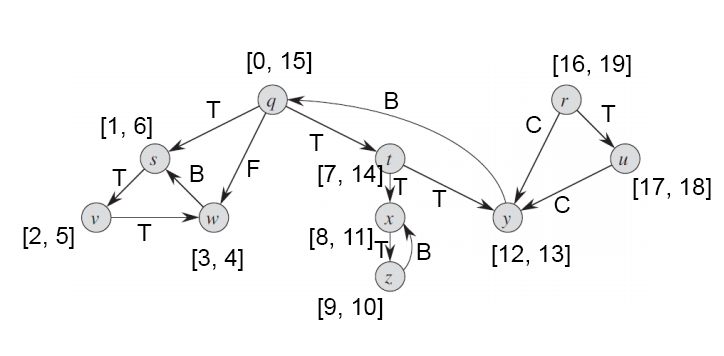
<style>
.page{position:relative;width:724px;height:356px;background:#ffffff}
.page>*{position:absolute;margin:0}
.t1{font:24px "ArialMT";color:#000000}
</style>
<div class="page">
<p class="t1" style="left:247px;top:52px;width:65px;height:22px">[0, 15]</p>
<p class="t1" style="left:553px;top:55px;width:78px;height:22px">[16, 19]</p>
<p class="t1" style="left:206px;top:101px;width:15px;height:17px">T</p>
<p class="t1" style="left:385px;top:92px;width:14px;height:17px">B</p>
<p class="t1" style="left:601px;top:105px;width:15px;height:17px">T</p>
<p class="t1" style="left:101px;top:117px;width:51px;height:22px">[1, 6]</p>
<p class="t1" style="left:526px;top:116px;width:16px;height:17px">C</p>
<p class="t1" style="left:309px;top:134px;width:15px;height:17px">T</p>
<p class="t1" style="left:248px;top:160px;width:12px;height:17px">F</p>
<p class="t1" style="left:112px;top:169px;width:15px;height:17px">T</p>
<p class="t1" style="left:190px;top:165px;width:14px;height:17px">B</p>
<p class="t1" style="left:318px;top:165px;width:65px;height:22px">[7, 14]</p>
<p class="t1" style="left:393px;top:178px;width:15px;height:17px">T</p>
<p class="t1" style="left:633px;top:178px;width:78px;height:22px">[17, 18]</p>
<p class="t1" style="left:432px;top:190px;width:15px;height:17px">T</p>
<p class="t1" style="left:554px;top:196px;width:16px;height:17px">C</p>
<p class="t1" style="left:23px;top:227px;width:51px;height:22px">[2, 5]<br>]</p>
<p class="t1" style="left:137px;top:224px;width:15px;height:17px">T</p>
<p class="t1" style="left:310px;top:228px;width:63px;height:22px">[8, 11]</p>
<p class="t1" style="left:374px;top:241px;width:15px;height:17px">T</p>
<p class="t1" style="left:417px;top:243px;width:14px;height:17px">B</p>
<p class="t1" style="left:492px;top:245px;width:78px;height:22px">[12, 13]</p>
<p class="t1" style="left:192px;top:249px;width:51px;height:22px">[3, 4]</p>
<p class="t1" style="left:318px;top:298px;width:65px;height:22px">[9, 10]</p>
</div>
